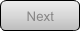
<style>
.page{position:relative;width:80px;height:31px}
.page>*{position:absolute;margin:0}
.t1{font:13.3px "ArialMT";color:#898888}
</style>
<div class="page">
<p class="t1" style="left:27px;top:11px;width:27px;height:10px">Next</p>
</div>
